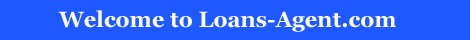
<style>
.page{position:relative;width:470px;height:40px;background:#1e59ff}
.page>*{position:absolute;margin:0}
.t1{font:22px "Georgia-Bold";color:#fbfaff}
</style>
<div class="page">
<p class="t1" style="left:58px;top:10px;width:338px;height:22px">Welcome to Loans-Agent.com</p>
</div>
